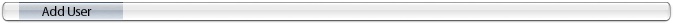
<style>
.page{position:relative;width:673px;height:25px;background:#ffffff}
.page>*{position:absolute;margin:0}
.t1{font:13px "Myriad-Roman";color:#000000}
</style>
<div class="page">
<p class="t1" style="left:42px;top:6px;width:50px;height:10px">Add User</p>
</div>
